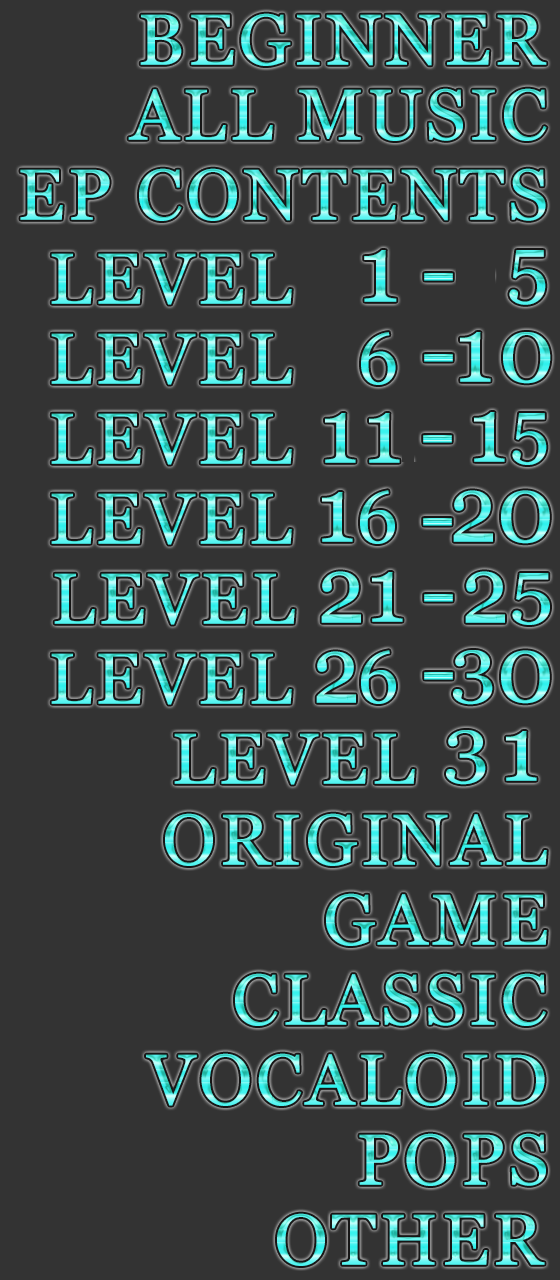
<style>
.page{position:relative;width:560px;height:1280px;background:#333333}
.page>*{position:absolute;margin:0}
.t1{font:72px "Vani";letter-spacing:0.05em}
.t2{font:75.6px "Vani";letter-spacing:0.05em;scale:1.11 1}
.t3{font:92px "Vani";letter-spacing:0.05em}
</style>
<div class="page">
<p class="t1" style="left:140px;top:13px;width:407px;height:53px">BEGINNER</p>
<p class="t1" style="left:128px;top:88px;width:419px;height:53px">ALL MUSIC</p>
<p class="t1" style="left:20px;top:168px;width:526px;height:53px">EP CONTENTS</p>
<p class="t1" style="left:174px;top:733px;width:241px;height:52px">LEVEL</p>
<p class="t2" style="left:446px;top:730px;width:40px;height:55px">3</p>
<p class="t3" style="left:506px;top:731px;width:31px;height:50px">1</p>
<p class="t1" style="left:165px;top:813px;width:382px;height:53px">ORIGINAL</p>
<p class="t1" style="left:326px;top:893px;width:221px;height:53px">GAME</p>
<p class="t1" style="left:235px;top:973px;width:311px;height:53px">CLASSIC</p>
<p class="t1" style="left:146px;top:1053px;width:399px;height:53px">VOCALOID</p>
<p class="t1" style="left:359px;top:1133px;width:187px;height:53px">POPS</p>
<p class="t1" style="left:277px;top:1213px;width:268px;height:53px">OTHER</p>
</div>
